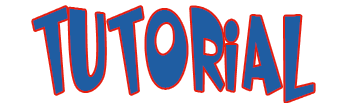
<style>
.page{position:relative;width:341px;height:103px;background:#ffffff}
.page>*{position:absolute;margin:0}
.t1{font:112.1px "WhimsyTT";color:#1f5da2;scale:0.58 1}
</style>
<div class="page">
<p class="t1" style="left:33px;top:7px;width:281px;height:95px">tutorial</p>
</div>
